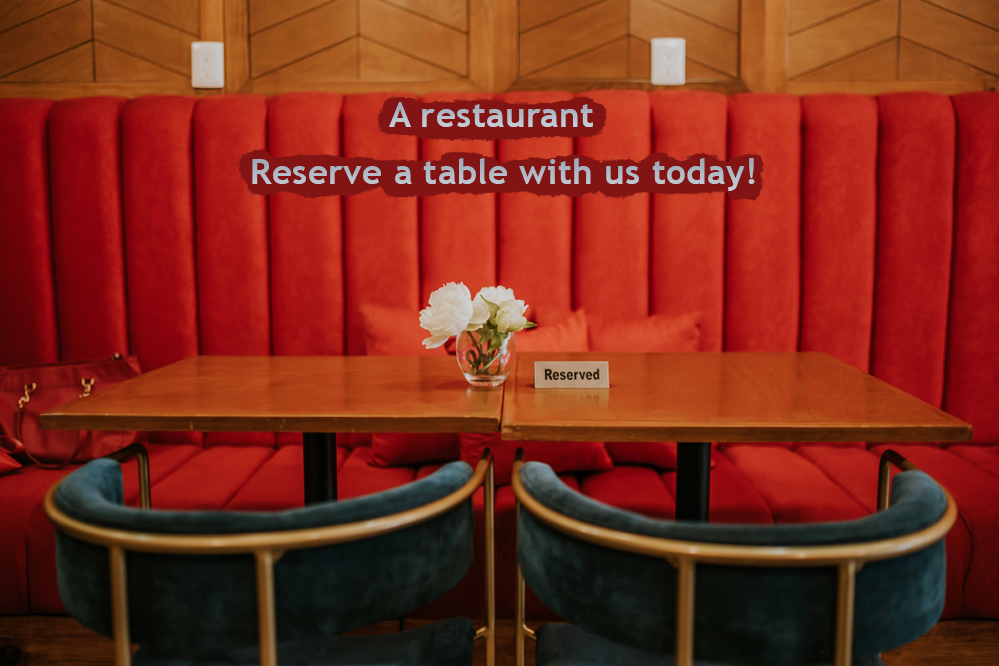
<style>
.page{position:relative;width:999px;height:666px}
.page>*{position:absolute;margin:0}
.t1{font:35px "TrebuchetMS-Bold";letter-spacing:0.01em;color:#b8bfcb}
.t2{font:35px "TrebuchetMS-Bold";letter-spacing:0.01em;color:#b1bac6}
</style>
<div class="page">
<p class="t1" style="left:389px;top:102px;width:204px;height:25px">A restaurant</p>
<p class="t2" style="left:252px;top:158px;width:503px;height:33px">Reserve a table with us today!</p>
</div>
